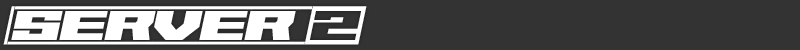
<style>
.page{position:relative;width:800px;height:50px;background:#333333}
.page>*{position:absolute;margin:0}
.t1{font:38.1px "62DRAGZ";color:#ffffff}
</style>
<div class="page">
<p class="t1" style="left:3px;top:6px;width:364px;height:39px">(SERVER_2</p>
</div>
